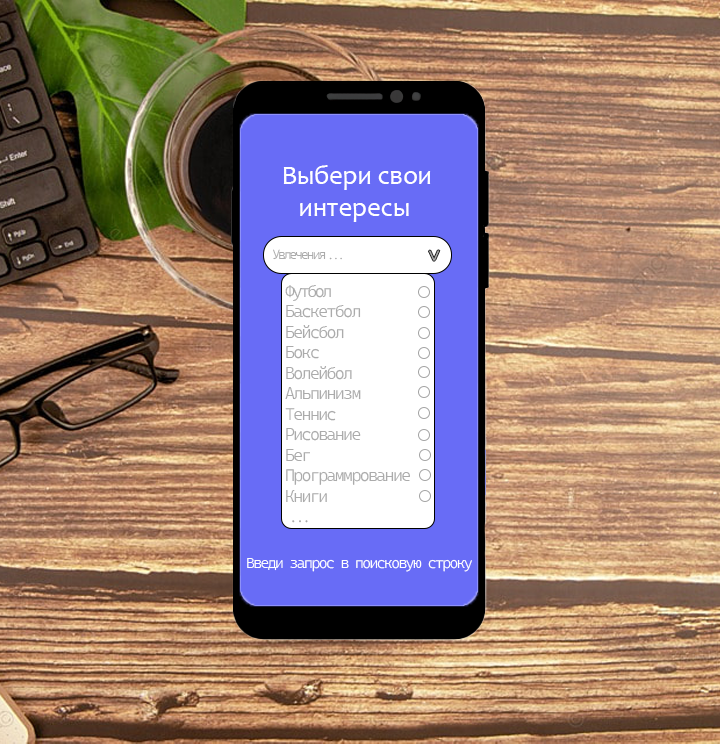
<style>
.page{position:relative;width:720px;height:744px}
.page>*{position:absolute;margin:0}
.t1{font:26.7px "Candara";color:#ffffff}
.t2{font:13.3px "CascadiaCodeRoman_317.000wght";letter-spacing:-0.15em;color:#ababab}
.t3{font:17.1px "CascadiaCodeRoman_317.000wght";letter-spacing:-0.1em;color:#ababab}
.t4{font:17.1px "CascadiaCodeRoman_317.000wght";letter-spacing:-0.15em;color:#ababab}
.t5{font:15px "CascadiaCodeRoman_317.000wght";letter-spacing:-0.1em;color:#ffffff}
</style>
<div class="page">
<p class="t1" style="left:283px;top:165px;width:148px;height:57px">Выбери свои <br>   интересы</p>
<p class="t2" style="left:273px;top:249px;width:69px;height:11px">Увлечения...</p>
<p class="t3" style="left:285px;top:285px;width:125px;height:238px"><span class="t4">Футбол</span><br>Баскетбол<br>Бейсбол<br>Бокс<br>Волейбол<br>Альпинизм<br>Теннис<br>Рисование<br>Бег<br>Программрование<br>Книги<br>...</p>
<p class="t5" style="left:247px;top:558px;width:225px;height:14px">Введи запрос в поисковую строку</p>
</div>
